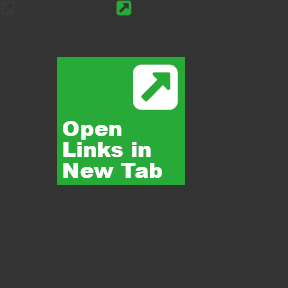
<style>
.page{position:relative;width:288px;height:288px;background:#333333}
.page>*{position:absolute;margin:0}
.t1{font:21px/21px "Arial-Black";color:#ffffff}
</style>
<div class="page">
<p class="t1" style="left:63px;top:121px;width:99px;height:57px">Open Links in New Tab</p>
</div>
